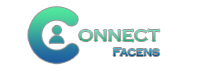
<style>
.page{position:relative;width:200px;height:71px;background:#ffffff}
.page>*{position:absolute;margin:0}
.t1{font:20.3px "CopperplateGothic-Light"}
.t2{font:12.2px "CopperplateGothic-Light"}
</style>
<div class="page">
<p class="t1" style="left:79px;top:29px;width:81px;height:13px">onnect</p>
<p class="t2" style="left:113px;top:48px;width:47px;height:8px">Facens</p>
</div>
